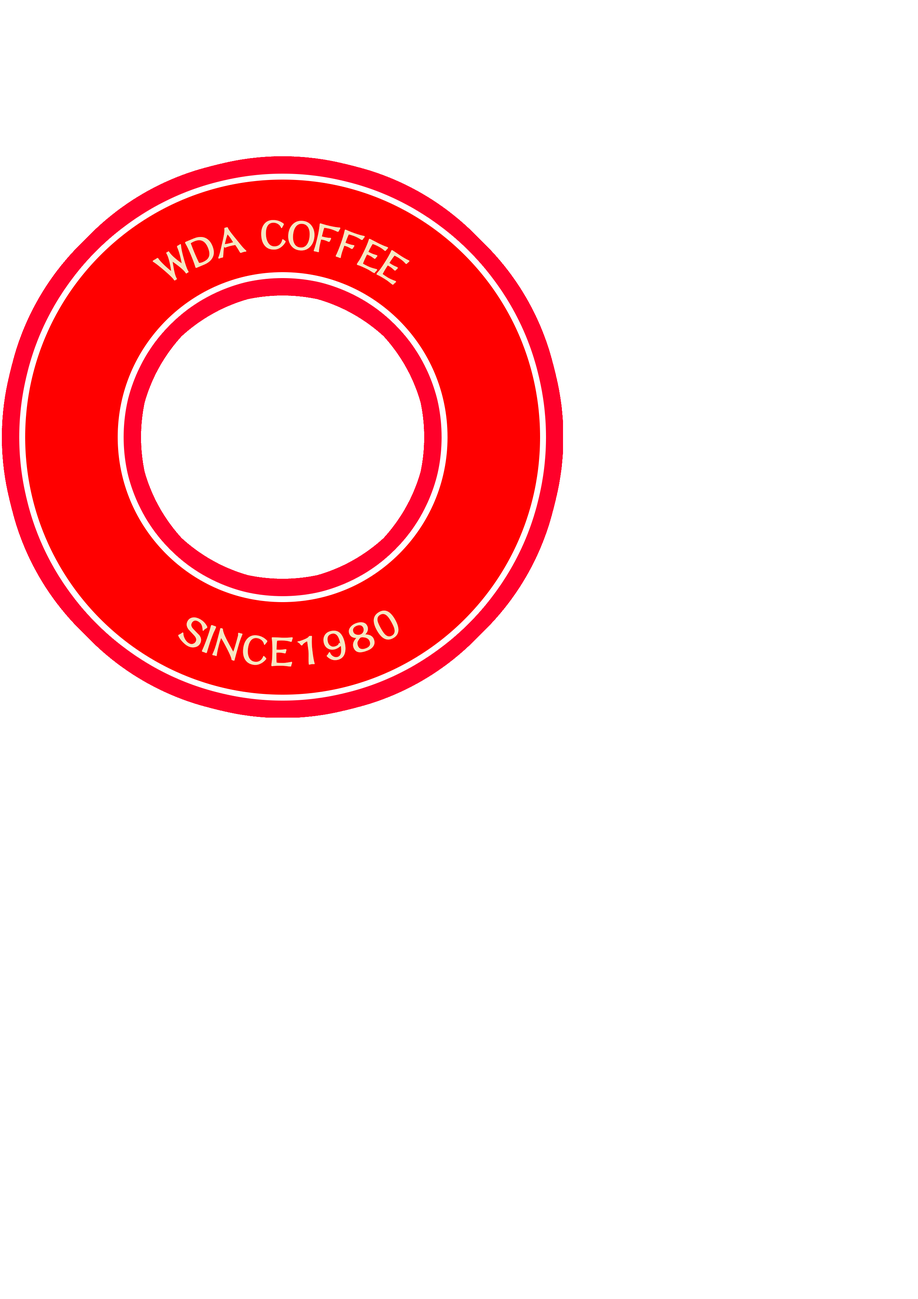
<style>
.page{position:relative;width:918px;height:1299px;background:#ffffff}
.page>*{position:absolute;margin:0}
.t1{font:46.3px "DFLungMen-W9-WINP-BF";letter-spacing:0.01em;color:#f6e8c3}
</style>
<div class="page">
<p class="t1" style="left:153px;top:220px;width:256px;height:65px">WDA COFFEE</p>
<p class="t1" style="left:178px;top:610px;width:221px;height:56px">SINCE1980</p>
</div>
